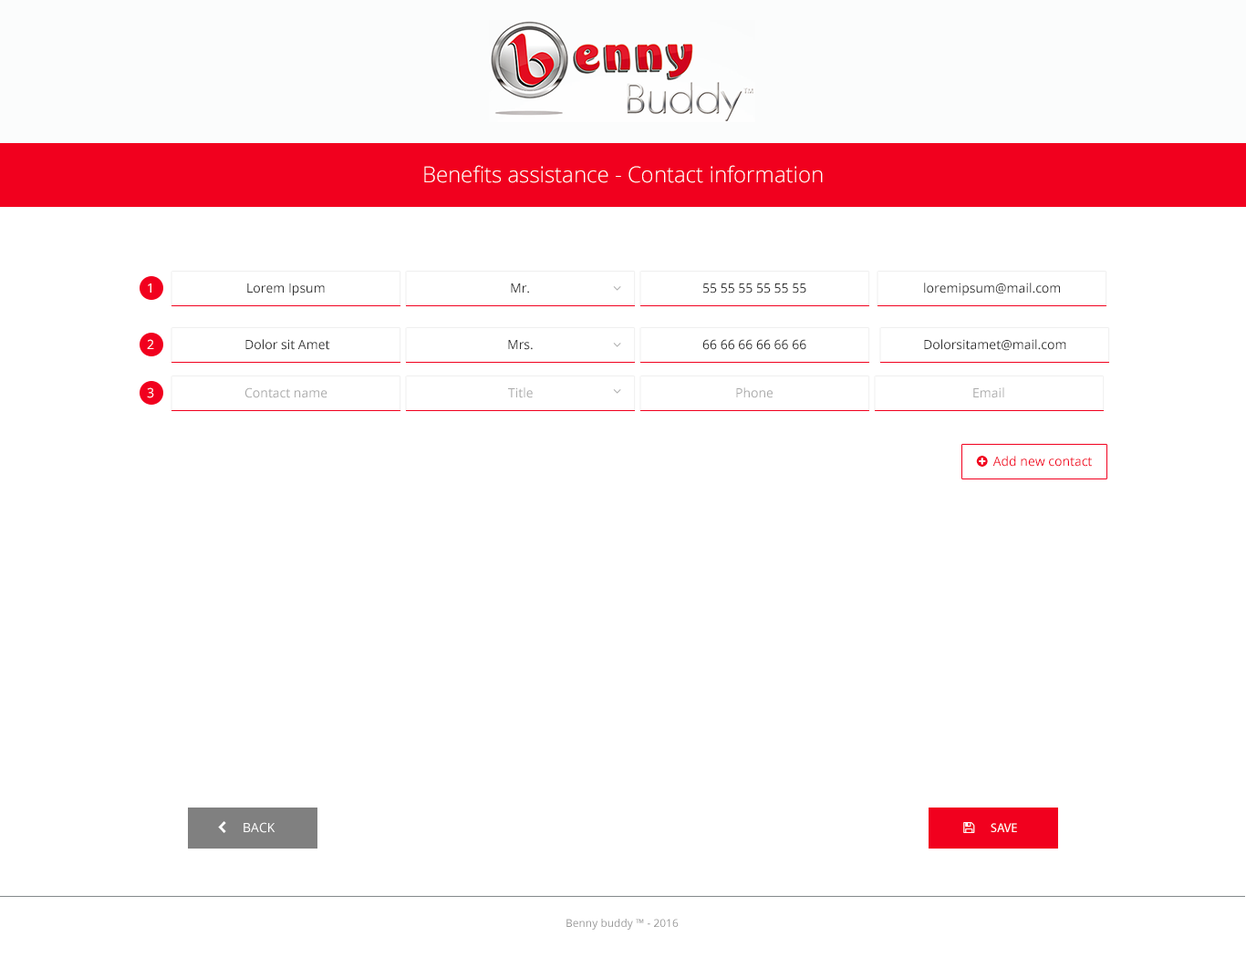
<style>
.page{position:relative;width:1246px;height:957px;background:#ffffff}
.page>*{position:absolute;margin:0}
.t1{font:21.9px "OpenSans-Light";color:#ffffff}
.t2{font:12.8px "OpenSans";color:#ffffff}
.t3{font:12.8px "OpenSans";color:#2e2e2e}
.t4{font:12.8px "OpenSans";color:#ababab}
.t5{font:10.9px "OpenSans";color:#979696}
</style>
<div class="page">
<p class="t1" style="left:424px;top:165px;width:398px;height:18px">Benefits assistance - Contact information</p>
<p class="t2" style="left:148px;top:284px;width:3px;height:9px">1</p>
<p class="t3" style="left:247px;top:284px;width:78px;height:12px">Lorem Ipsum</p>
<p class="t3" style="left:511px;top:284px;width:18px;height:10px">Mr.</p>
<p class="t3" style="left:703px;top:284px;width:103px;height:10px">55 55 55 55 55 55</p>
<p class="t3" style="left:924px;top:283px;width:136px;height:13px">loremipsum@mail.com</p>
<p class="t2" style="left:147px;top:339px;width:7px;height:10px">2</p>
<p class="t3" style="left:245px;top:339px;width:85px;height:11px">Dolor sit Amet</p>
<p class="t3" style="left:508px;top:340px;width:24px;height:10px">Mrs.</p>
<p class="t3" style="left:702px;top:339px;width:104px;height:11px">66 66 66 66 66 66</p>
<p class="t3" style="left:924px;top:339px;width:142px;height:12px">Dolorsitamet@mail.com</p>
<p class="t2" style="left:147px;top:388px;width:7px;height:10px">3</p>
<p class="t4" style="left:244px;top:388px;width:83px;height:10px">Contact name</p>
<p class="t4" style="left:508px;top:388px;width:24px;height:10px">Title</p>
<p class="t4" style="left:736px;top:388px;width:36px;height:10px">Phone</p>
<p class="t4" style="left:973px;top:388px;width:31px;height:10px">Email</p>
<p class="t5" style="left:566px;top:919px;width:112px;height:11px">Benny buddy ™ - 2016</p>
</div>
